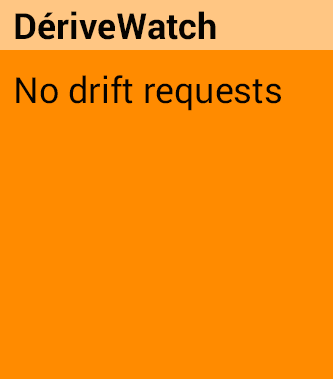
<style>
.page{position:relative;width:333px;height:379px;background:#ff8b00}
.page>*{position:absolute;margin:0}
.t1{font:36px "Roboto-Bold";color:#050300}
.t2{font:36px "Roboto-Black";color:#050300}
</style>
<div class="page">
<p class="t1" style="left:15px;top:11px;width:201px;height:29px">DériveWatch</p>
<p class="t2" style="left:16px;top:75px;width:265px;height:36px">No drift requests</p>
</div>
